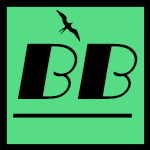
<style>
.page{position:relative;width:150px;height:150px;background:#55dc85}
.page>*{position:absolute;margin:0}
.t1{font:82.9px "Broadway";color:#000000;font-style:italic;text-decoration:underline}
</style>
<div class="page">
<p class="t1" style="left:13px;top:43px;width:125px;height:75px">BB</p>
</div>
